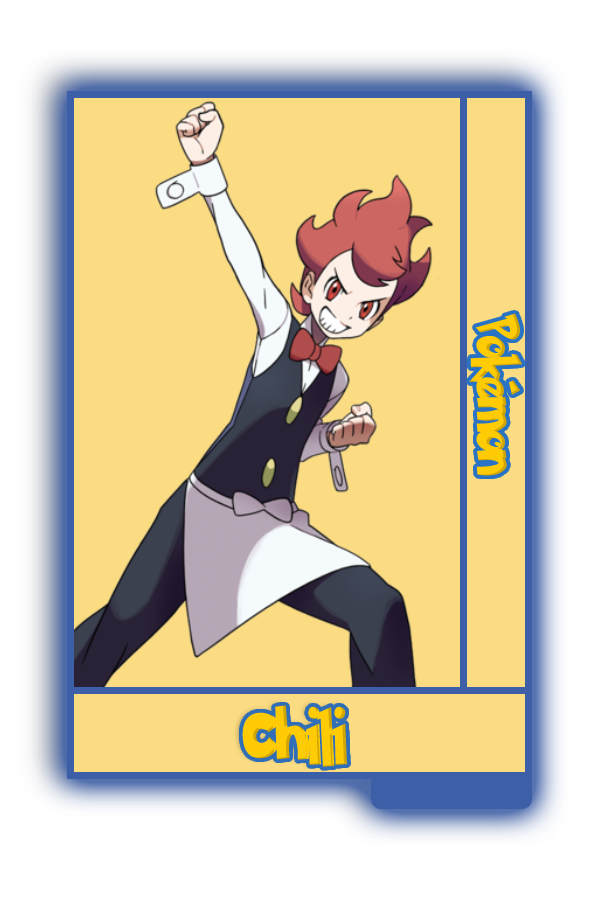
<style>
.page{position:relative;width:600px;height:900px;background:#fbdc83}
.page>*{position:absolute;margin:0}
.t1{font:48.8px "PokemonSolidNormal";color:#ffcb05;scale:0.8 1}
.t2{font:56.6px "PokemonSolidNormal";color:#ffcb05;scale:0.92 1}
</style>
<div class="page">
<p class="t1" style="left:469px;top:313px;width:54px;height:163px;rotate:90deg">Pokémon</p>
<p class="t2" style="left:242px;top:705px;width:105px;height:62px">Chili</p>
</div>
